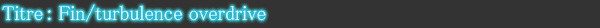
<style>
.page{position:relative;width:600px;height:28px;background:#333333}
.page>*{position:absolute;margin:0}
.t1{font:20px "MS-PMincho";color:#ffffff}
</style>
<div class="page">
<p class="t1" style="left:2px;top:4px;width:264px;height:18px">Titre : Fin/turbulence overdrive</p>
</div>
